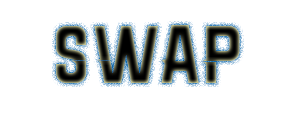
<style>
.page{position:relative;width:286px;height:116px;background:#ffffff}
.page>*{position:absolute;margin:0}
.t1{font:74.4px "MelmaLine"}
</style>
<div class="page">
<p class="t1" style="left:56px;top:25px;width:184px;height:58px">SwaP</p>
</div>
